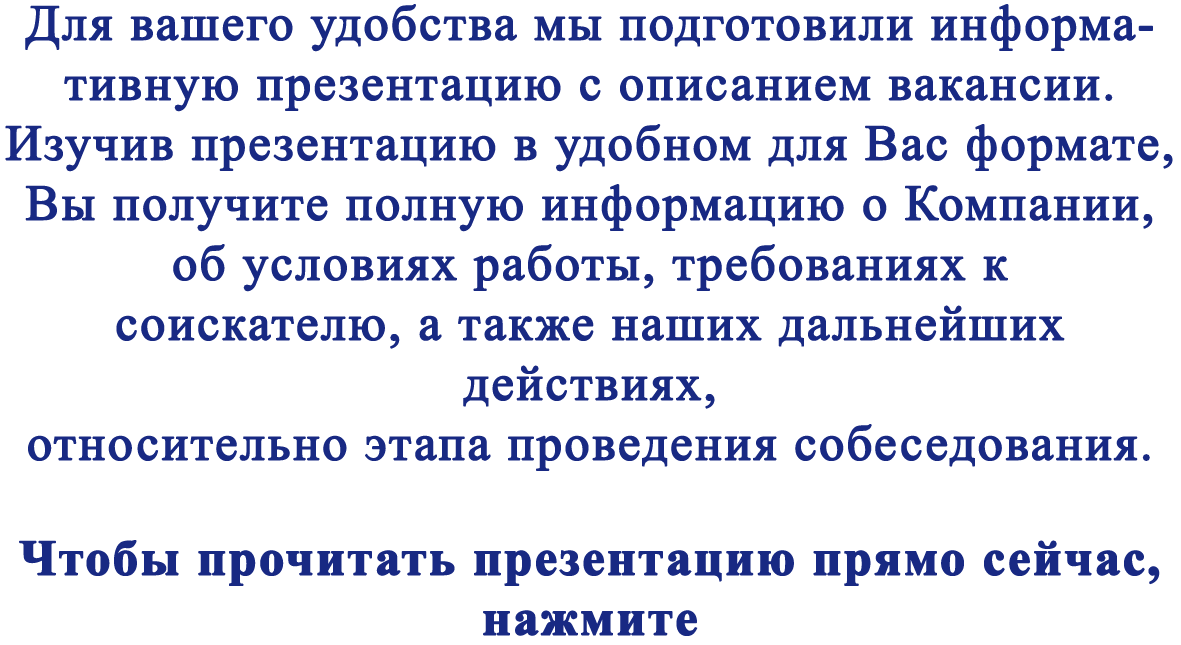
<style>
.page{position:relative;width:1181px;height:645px;background:#ffffff}
.page>*{position:absolute;margin:0}
.t1{font:50px "TimesNewRomanPSMT";letter-spacing:0.025em;color:#182983;font-weight:bold}
.t2{font:50px "TimesNewRomanPS-BoldMT";letter-spacing:0.025em;color:#182983;font-weight:bold}
</style>
<div class="page">
<p class="t1" style="left:5px;top:4px;width:1168px;height:632px;text-align:center">Для вашего удобства мы подготовили информативную презентацию с описанием вакансии. <br>Изучив презентацию в удобном для Вас формате, Вы получите полную информацию о Компании, <br>об условиях работы, требованиях к <br>соискателю, а также наших дальнейших <br>действиях, <br>относительно этапа проведения собеседования. <br><br><span class="t2">Чтобы прочитать презентацию прямо сейчас, <br>нажмите</span></p>
</div>
